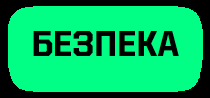
<style>
.page{position:relative;width:210px;height:98px;background:#00ff84}
.page>*{position:absolute;margin:0}
.t1{font:36px "UnitedSansReg-Heavy";color:#000000;scale:0.95 1}
</style>
<div class="page">
<p class="t1" style="left:33px;top:31px;width:146px;height:25px">БЕЗПЕКА</p>
</div>
